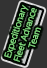
<style>
.page{position:relative;width:47px;height:68px;background:#333333}
.page>*{position:absolute;margin:0}
.t1{font:8px/10px "UDShinGoPro-Light";letter-spacing:-0.04em;color:#80d87d;font-weight:bold}
</style>
<div class="page">
<p class="t1" style="left:4px;top:4px;width:37px;height:58px;text-align:center;rotate:-72deg">Expeditionary<br>Fleet Advance<br>Team</p>
</div>
